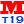
<style>
.page{position:relative;width:24px;height:24px;background:#ffffff}
.page>*{position:absolute;margin:0}
.t1{font:16.4px "BlackoakStd";color:#fc0000;scale:0.67 1}
.t2{font:11px "CopperplateGothic-Bold";color:#0035fc}
</style>
<div class="page">
<p class="t1" style="left:0px;top:1px;width:25px;height:13px">M</p>
<p class="t2" style="left:1px;top:16px;width:23px;height:7px">t19</p>
</div>
